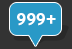
<style>
.page{position:relative;width:72px;height:49px;background:#333333}
.page>*{position:absolute;margin:0}
.t1{font:14px "YoonGothicPro790";color:#ffffff}
</style>
<div class="page">
<p class="t1" style="left:17px;top:13px;width:39px;height:13px">999+</p>
</div>
